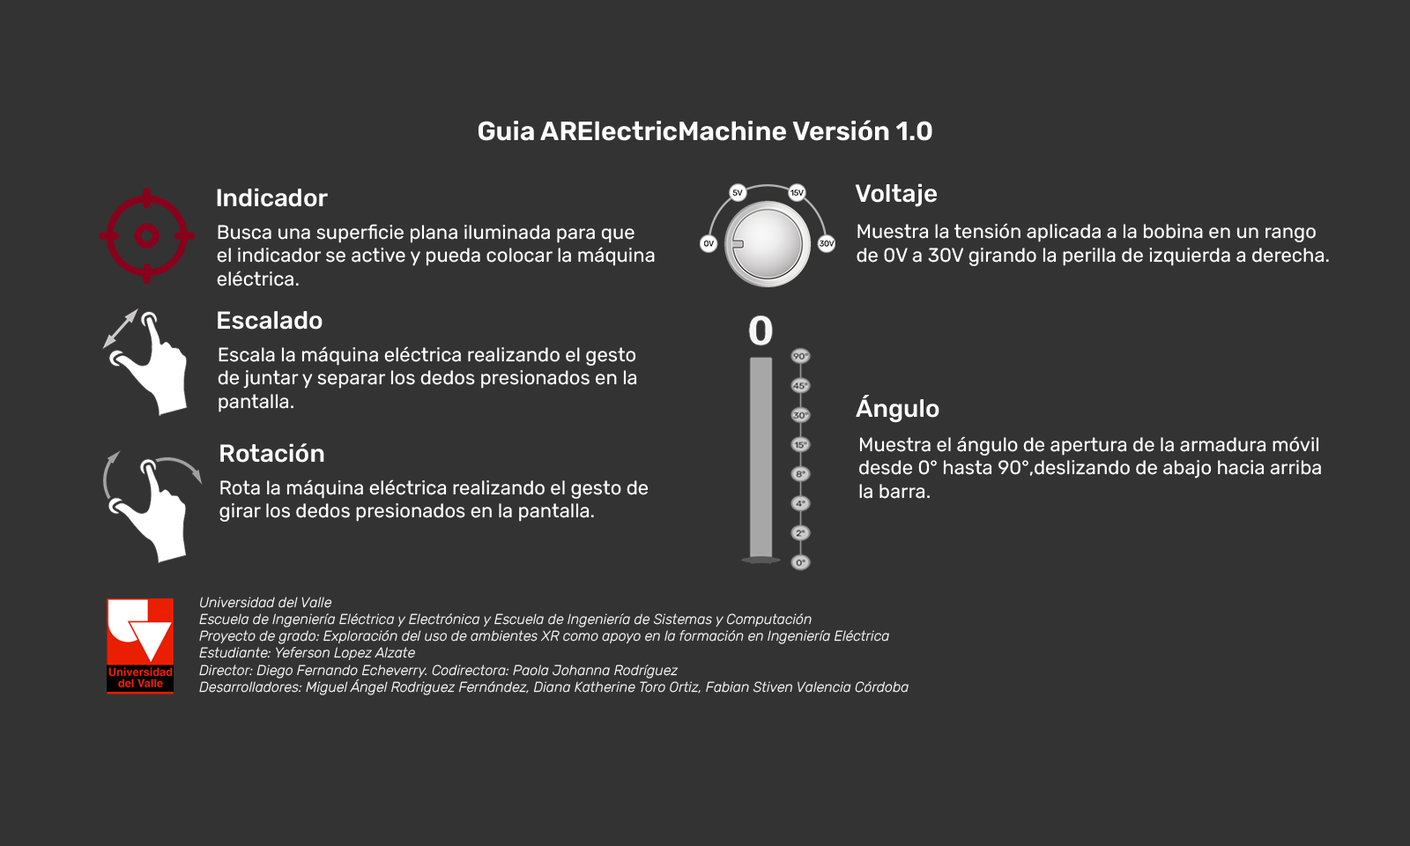
<style>
.page{position:relative;width:1410px;height:846px;background:#333333}
.page>*{position:absolute;margin:0}
.t1{font:26.4px "Rubik-SemiBold";color:#ffffff}
.t2{font:24.7px "Rubik-Medium";color:#ffffff}
.t3{font:19.4px "Rubik-Regular";color:#ffffff}
.t4{font:14.1px "Rubik-LightItalic";color:#ffffff}
</style>
<div class="page">
<p class="t1" style="left:478px;top:120px;width:454px;height:21px">Guia ARElectricMachine Versión 1.0</p>
<p class="t2" style="left:855px;top:183px;width:82px;height:24px">Voltaje</p>
<p class="t2" style="left:217px;top:188px;width:111px;height:19px">Indicador</p>
<p class="t3" style="left:217px;top:224px;width:438px;height:62px">Busca una superficie plana iluminada para que<br>el indicador se active y pueda colocar la máquina<br>eléctrica.</p>
<p class="t3" style="left:856px;top:223px;width:473px;height:43px">Muestra la tensión aplicada a la bobina en un rango<br>de 0V a 30V girando la perilla de izquierda a derecha.</p>
<p class="t2" style="left:218px;top:311px;width:104px;height:19px">Escalado</p>
<p class="t3" style="left:218px;top:346px;width:419px;height:66px">Escala la máquina eléctrica realizando el gesto<br>de juntar y separar los dedos presionados en la <br>pantalla.</p>
<p class="t2" style="left:856px;top:395px;width:83px;height:28px">Ángulo</p>
<p class="t3" style="left:858px;top:436px;width:463px;height:63px">Muestra el ángulo de apertura de la armadura móvil<br>desde 0° hasta 90°,deslizando de abajo hacia arriba <br>la barra.</p>
<p class="t2" style="left:220px;top:443px;width:104px;height:20px">Rotación</p>
<p class="t3" style="left:219px;top:479px;width:429px;height:43px">Rota la máquina eléctrica realizando el gesto de <br>girar los dedos presionados en la pantalla.</p>
<p class="t4" style="left:199px;top:596px;width:709px;height:99px">Universidad del Valle<br>Escuela de Ingeniería Eléctrica y Electrónica y Escuela de Ingeniería de Sistemas y Computación<br>Proyecto de grado: Exploración del uso de ambientes XR como apoyo en la formación en Ingeniería Eléctrica  <br>Estudiante: Yeferson Lopez Alzate<br>Director: Diego Fernando Echeverry. Codirectora: Paola Johanna Rodríguez<br>Desarrolladores: Miguel Ángel Rodriguez Fernández, Diana Katherine Toro Ortiz, Fabian Stiven Valencia Córdoba</p>
</div>
